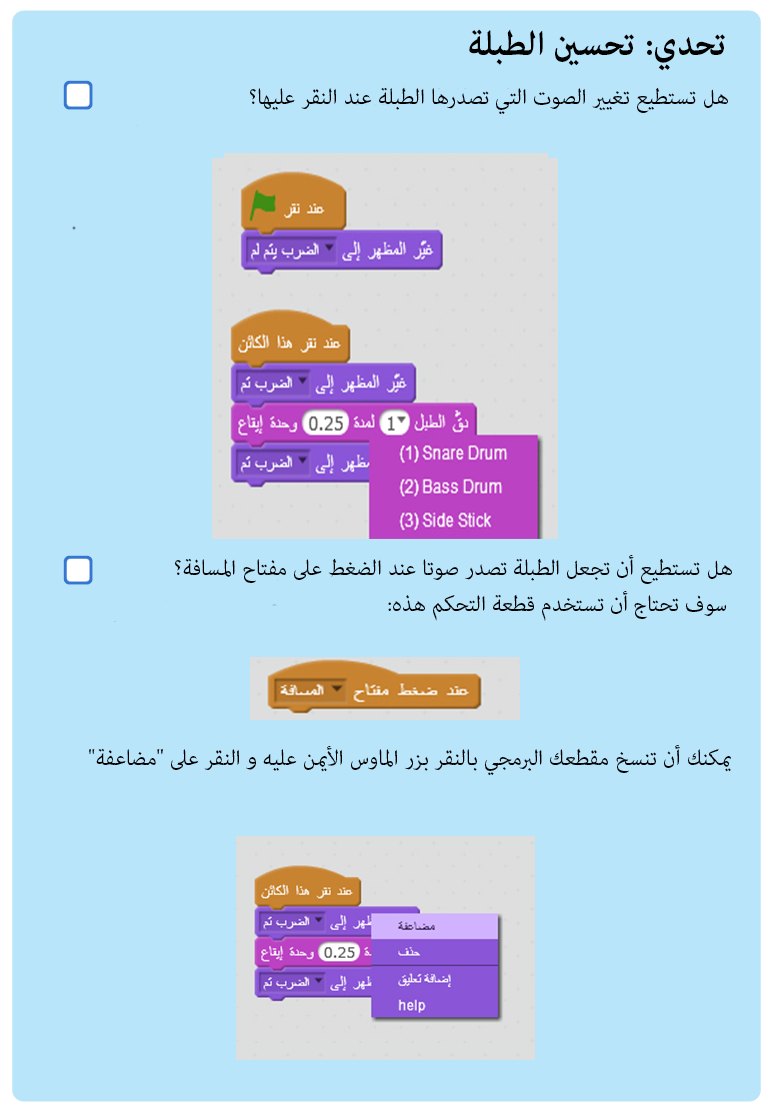
<style>
.page{position:relative;width:769px;height:1115px;background:#b9e5fa}
.page>*{position:absolute;margin:0}
.t1{font:48px "AdobeArabic-Bold";color:#000000}
.t2{font:30px "AdobeArabic-Regular";color:#000000}
</style>
<div class="page">
<p class="t1" style="left:469px;top:29px;width:256px;height:42px">تحدي: تحسين الطبلة</p>
<p class="t2" style="left:250px;top:87px;width:478px;height:28px">هل تستطيع تغيير الصوت التي تصدرها الطبلة عند النقر عليها؟</p>
<p class="t2" style="left:175px;top:555px;width:557px;height:66px">هل تستطيع أن تجعل الطبلة تصدر صوتا عند الضغط على مفتاح المسافة؟<br> سوف تحتاج أن تستخدم قطعة التحكم هذه:</p>
<p class="t2" style="left:89px;top:745px;width:642px;height:31px">يمكنك أن تنسخ مقطعك البرمجي بالنقر بزر الماوس الأيمن عليه و النقر على "مضاعفة"</p>
</div>
